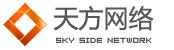
<style>
.page{position:relative;width:174px;height:50px;background:#ffffff}
.page>*{position:absolute;margin:0}
.t1{font:25px "MicrosoftYaHei";color:#565656}
.t2{font:8.3px "04b08";letter-spacing:0.02em;color:#565656}
</style>
<div class="page">
<p class="t1" style="left:53px;top:6px;width:101px;height:25px">天方网络</p>
<p class="t2" style="left:56px;top:37px;width:96px;height:6px">Sky side NetWork</p>
</div>
